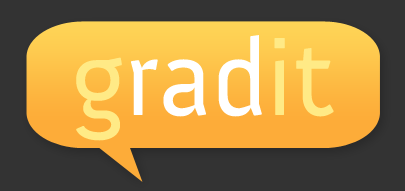
<style>
.page{position:relative;width:405px;height:191px;background:#333333}
.page>*{position:absolute;margin:0}
.t1{font:110px "Anivers-Regular";color:#ffffff}
.t2{font:110px "Anivers-Regular";color:#ffea86}
</style>
<div class="page">
<p class="t1" style="left:76px;top:35px;width:258px;height:106px"><span class="t2">g</span>rad<span class="t2">it</span></p>
</div>
